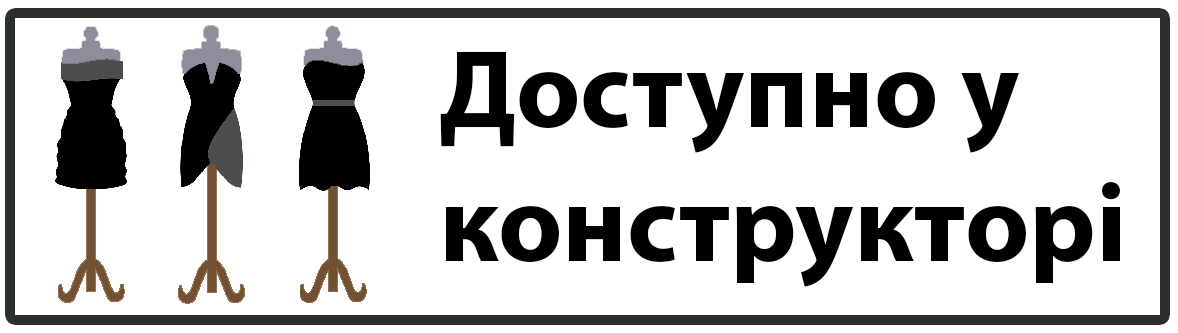
<style>
.page{position:relative;width:1178px;height:333px;background:#ffffff}
.page>*{position:absolute;margin:0}
.t1{font:112px "MyriadPro-Bold";color:#000000}
</style>
<div class="page">
<p class="t1" style="left:440px;top:51px;width:680px;height:236px">Доступно у <br>конструкторі</p>
</div>
